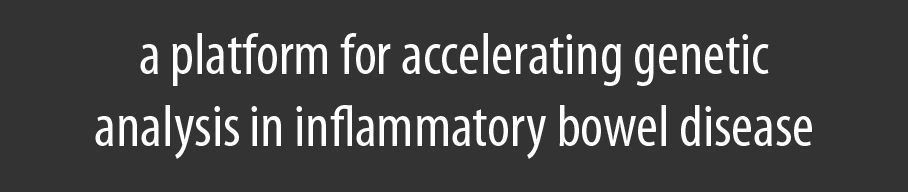
<style>
.page{position:relative;width:908px;height:192px;background:#333333}
.page>*{position:absolute;margin:0}
.t1{font:60px "MyriadPro-Cond";color:#ffffff}
</style>
<div class="page">
<p class="t1" style="left:95px;top:33px;width:717px;height:126px;text-align:center">a platform for accelerating genetic <br>analysis in inflammatory bowel disease</p>
</div>
